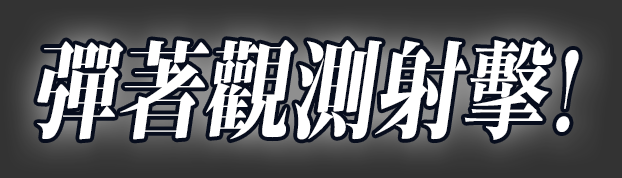
<style>
.page{position:relative;width:622px;height:178px}
.page>*{position:absolute;margin:0}
.t1{font:106.1px "KochoStd-Heavy";color:#ffffff;font-style:italic;scale:0.81 1}
.t2{font:106.1px "RyuminPro-ExBold";color:#ffffff;font-style:italic;scale:0.81 1}
</style>
<div class="page">
<p class="t1" style="left:37px;top:40px;width:542px;height:100px">彈著觀測射<span class="t2">擊</span>!</p>
</div>
